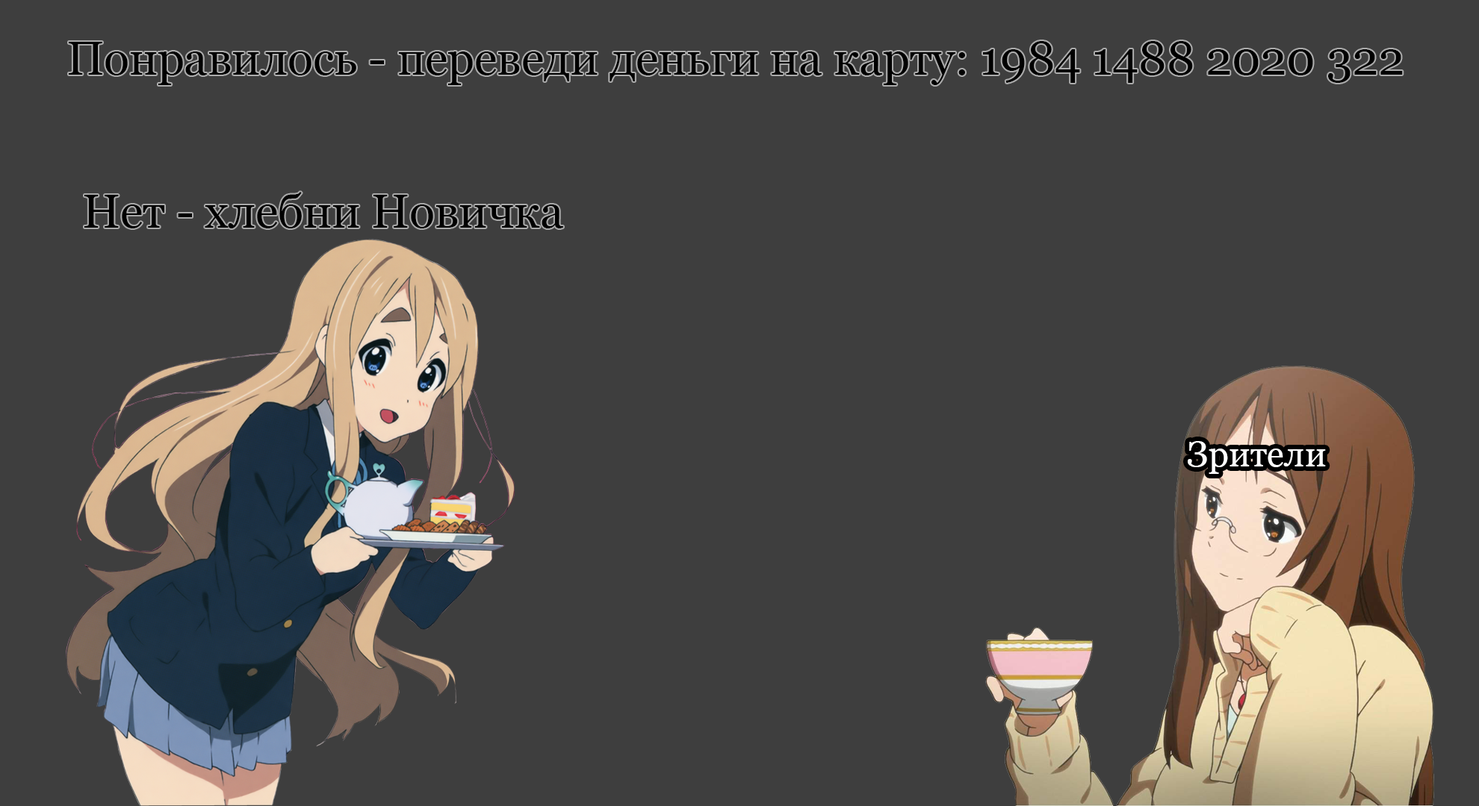
<style>
.page{position:relative;width:1479px;height:806px;background:#3e3e3e}
.page>*{position:absolute;margin:0}
.t1{font:46.7px "Georgia";color:#000000}
.t2{font:35.4px "Georgia";color:#ffffff}
</style>
<div class="page">
<p class="t1" style="left:69px;top:41px;width:1333px;height:44px">Понравилось - переведи деньги на карту: 1984 1488 2020 322</p>
<p class="t1" style="left:84px;top:192px;width:479px;height:37px">Нет - хлебни Новичка</p>
<p class="t2" style="left:1187px;top:441px;width:138px;height:33px">Зрители</p>
</div>
